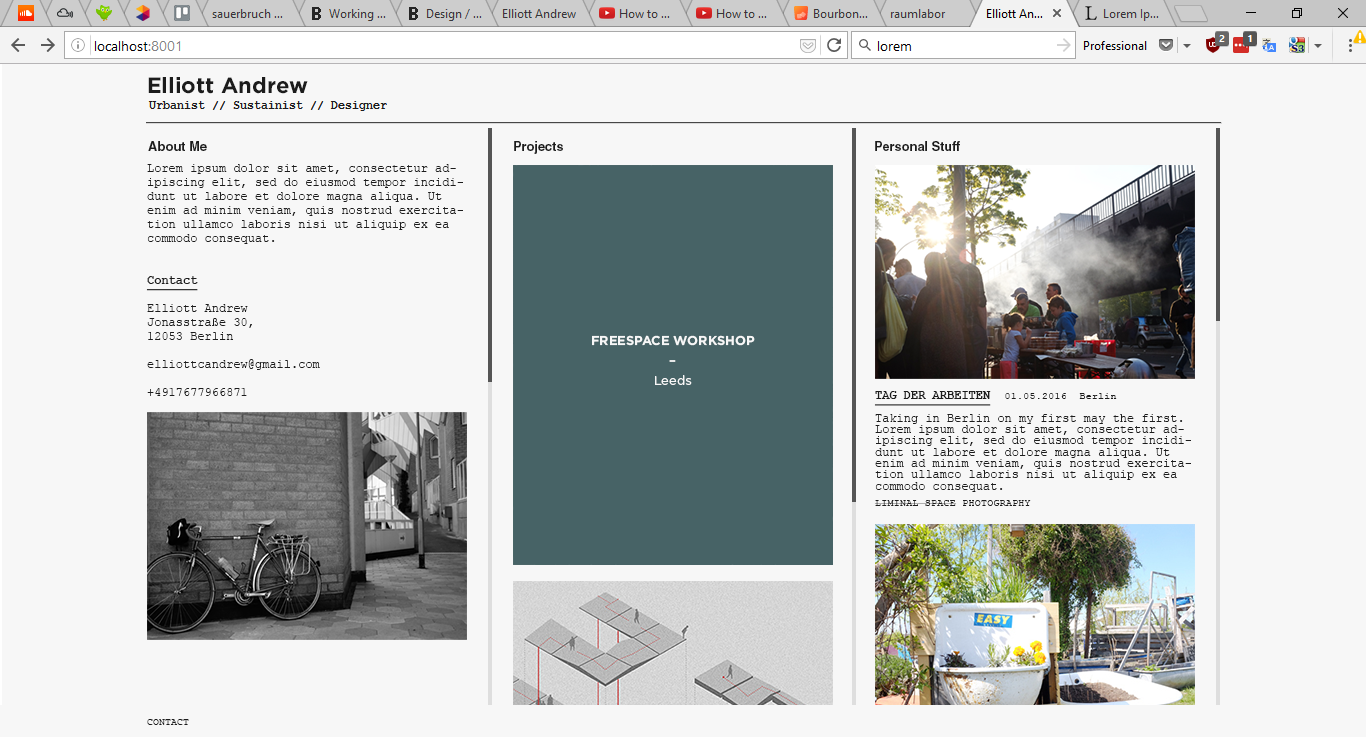
<style>
.page{position:relative;width:1366px;height:737px;background:#f7f7f7}
.page>*{position:absolute;margin:0}
.t1{font:22px "Gotham-Bold";color:#1c1c1c}
.t2{font:12.9px "HelveticaLTStd-Bold";color:#1c1c1c}
.t3{font:12px/14px "CourierNewPSMT";color:#1c1c1c}
.t4{font:12px/14px "CourierNewPS-BoldMT";color:#1c1c1c;text-decoration:underline}
.t5{font:12.9px/20px "Gotham-Bold";color:#f7f7f7;text-transform:uppercase}
.t6{font:12.9px/20px "Gotham-Medium";color:#f7f7f7}
.t7{font:12.9px/20px "GothamBook";color:#f7f7f7}
.t8{font:12px/11.3px "CourierNewPSMT";color:#1c1c1c}
.t9{font:12px/11.3px "CourierNewPS-BoldMT";color:#1c1c1c;text-decoration:underline}
.t10{font:10.4px/11.3px "CourierNewPSMT";color:#1c1c1c}
.t11{font:10.4px/16.1px "CourierNewPSMT";color:#1c1c1c;text-transform:uppercase}
.t12{font:10px "CourierNewPSMT";color:#1c1c1c;text-transform:uppercase}
</style>
<div class="page">
<p class="t1" style="left:148px;top:77px;width:160px;height:17px">Elliott Andrew</p>
<p class="t2" style="left:148px;top:141px;width:59px;height:10px">About Me</p>
<p class="t2" style="left:514px;top:141px;width:49px;height:13px">Projects</p>
<p class="t2" style="left:875px;top:141px;width:85px;height:10px">Personal Stuff</p>
<p class="t3" style="left:146px;top:164px;width:317px;height:232px">Lorem ipsum dolor sit amet, consectetur adipiscing elit, sed do eiusmod tempor incididunt ut labore et dolore magna aliqua. Ut enim ad minim veniam, quis nostrud exercitation ullamco laboris nisi ut aliquip ex ea commodo consequat.<br><br><br><span class="t4">Contact<br></span><br>Elliott Andrew<br>Jonasstraße 30,<br>12053 Berlin<br><br>elliottcandrew@gmail.com<br><br>+4917677966871</p>
<p class="t5" style="left:592px;top:335px;width:163px;height:50px;text-align:center">Freespace Workshop<br><span class="t6">–<br></span><span class="t7">Leeds</span></p>
<p class="t8" style="left:874px;top:391px;width:317px;height:115px"><span class="t9">TAG DER ARBEITEN  </span><span class="t10">01.05.2016  Berlin<br><br></span>Taking in Berlin on my first may the first. Lorem ipsum dolor sit amet, consectetur adipiscing elit, sed do eiusmod tempor incididunt ut labore et dolore magna aliqua. Ut enim ad minim veniam, quis nostrud exercitation ullamco laboris nisi ut aliquip ex ea commodo consequat.<br><span class="t11">liminal space photography</span></p>
<p class="t12" style="left:147px;top:719px;width:42px;height:6px">contact</p>
</div>
